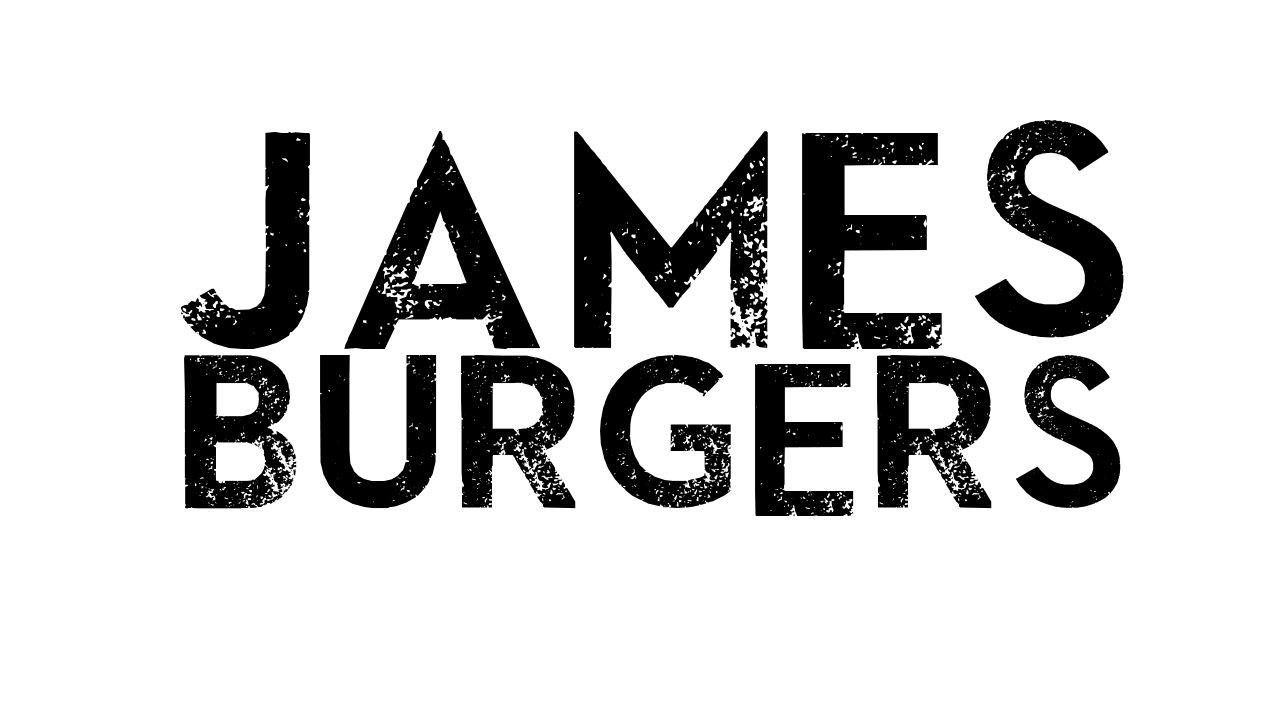
<style>
.page{position:relative;width:1280px;height:720px;background:#ffffff}
.page>*{position:absolute;margin:0}
.t1{font:228.7px "SkyFallDone";color:#000000}
.t2{font:161.3px "SkyFallDone";color:#000000}
</style>
<div class="page">
<p class="t1" style="left:181px;top:120px;width:943px;height:229px">JAMES</p>
<p class="t2" style="left:184px;top:354px;width:937px;height:162px">BURGERS</p>
</div>
